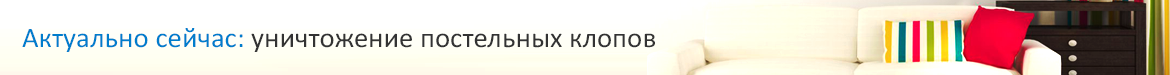
<style>
.page{position:relative;width:1170px;height:75px}
.page>*{position:absolute;margin:0}
.t1{font:28.3px "Calibri";color:#333333}
.t2{font:28.3px "Calibri";color:#007dcc}
</style>
<div class="page">
<p class="t1" style="left:22px;top:28px;width:633px;height:24px"><span class="t2">Актуально сейчас: </span>уничтожение постельных клопов</p>
</div>
